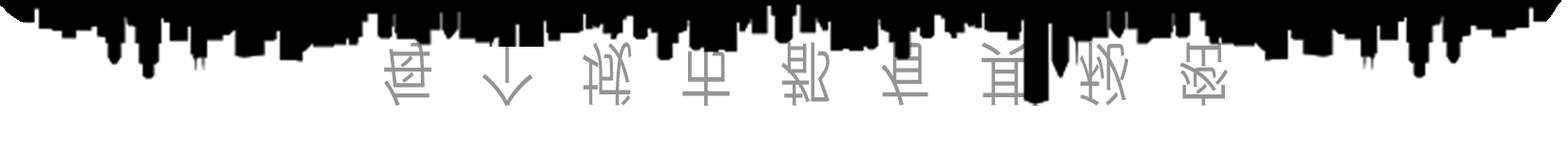
<style>
.page{position:relative;width:1568px;height:143px;background:#ffffff}
.page>*{position:absolute;margin:0}
.t1{font:67.5px/26.4px "KozGoPr6N-Regular";letter-spacing:0.94em;color:#949494;scale:0.76 1}
.t2{font:67.5px/26.4px "Poppins-Bold";letter-spacing:0.08em;color:#949494;scale:0.76 1}
.t3{font:67.5px/26.4px "KozGoPr6N-Regular";letter-spacing:0.08em;color:#949494;scale:0.76 1}
</style>
<div class="page">
<p class="t1" style="left:384px;top:42px;width:844px;height:64px;text-align:center"><span class="t2"><br></span>每个城市都有其秘密<br><span class="t3">每个城市都有其秘密</span></p>
</div>
